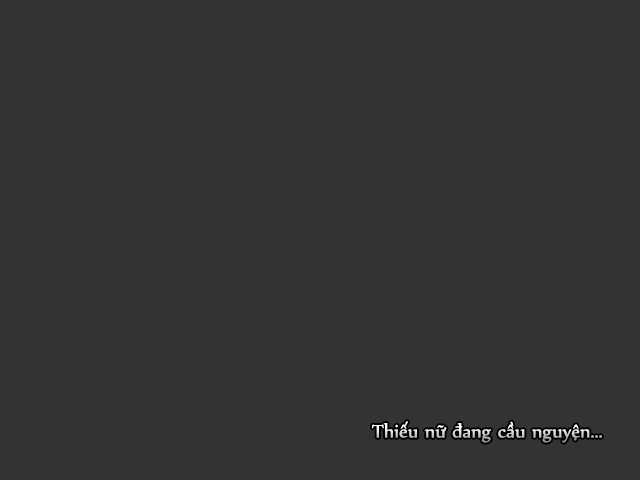
<style>
.page{position:relative;width:640px;height:480px;background:#333333}
.page>*{position:absolute;margin:0}
.t1{font:22px "UTM-Nyala"}
</style>
<div class="page">
<p class="t1" style="left:372px;top:421px;width:230px;height:22px">Thiếu nữ đang cầu nguyện...</p>
</div>
